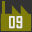
<style>
.page{position:relative;width:32px;height:32px;background:#817d0b}
.page>*{position:absolute;margin:0}
.t1{font:16px "AgencyFB-Bold";color:#ececec}
</style>
<div class="page">
<p class="t1" style="left:9px;top:16px;width:14px;height:13px">09</p>
</div>
